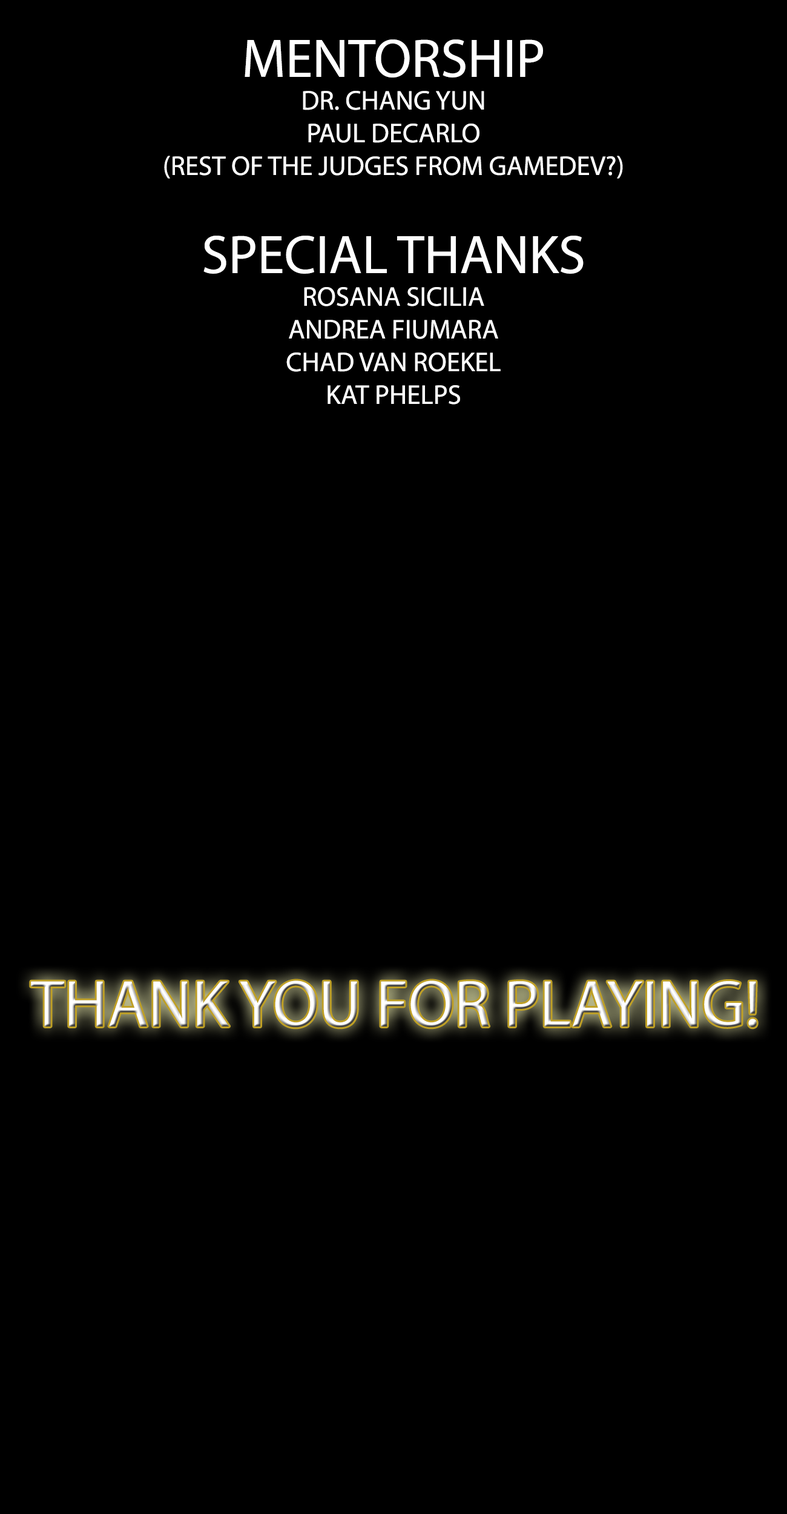
<style>
.page{position:relative;width:787px;height:1514px;background:#000000}
.page>*{position:absolute;margin:0}
.t1{font:27.3px "MyriadPro-Regular";color:#ffffff}
.t2{font:54.5px "MyriadPro-Regular";color:#ffffff}
.t3{font:66.6px "MyriadPro-Regular"}
</style>
<div class="page">
<p class="t1" style="left:164px;top:39px;width:459px;height:366px;text-align:center"><span class="t2">MENTORSHIP<br></span>DR. CHANG YUN<br>PAUL DECARLO<br>(REST OF THE JUDGES FROM GAMEDEV?)<br><br><span class="t2">SPECIAL THANKS<br></span>ROSANA SICILIA<br>ANDREA FIUMARA<br>CHAD VAN ROEKEL<br>KAT PHELPS</p>
<p class="t3" style="left:31px;top:981px;width:726px;height:47px">THANK YOU FOR PLAYING!</p>
</div>
